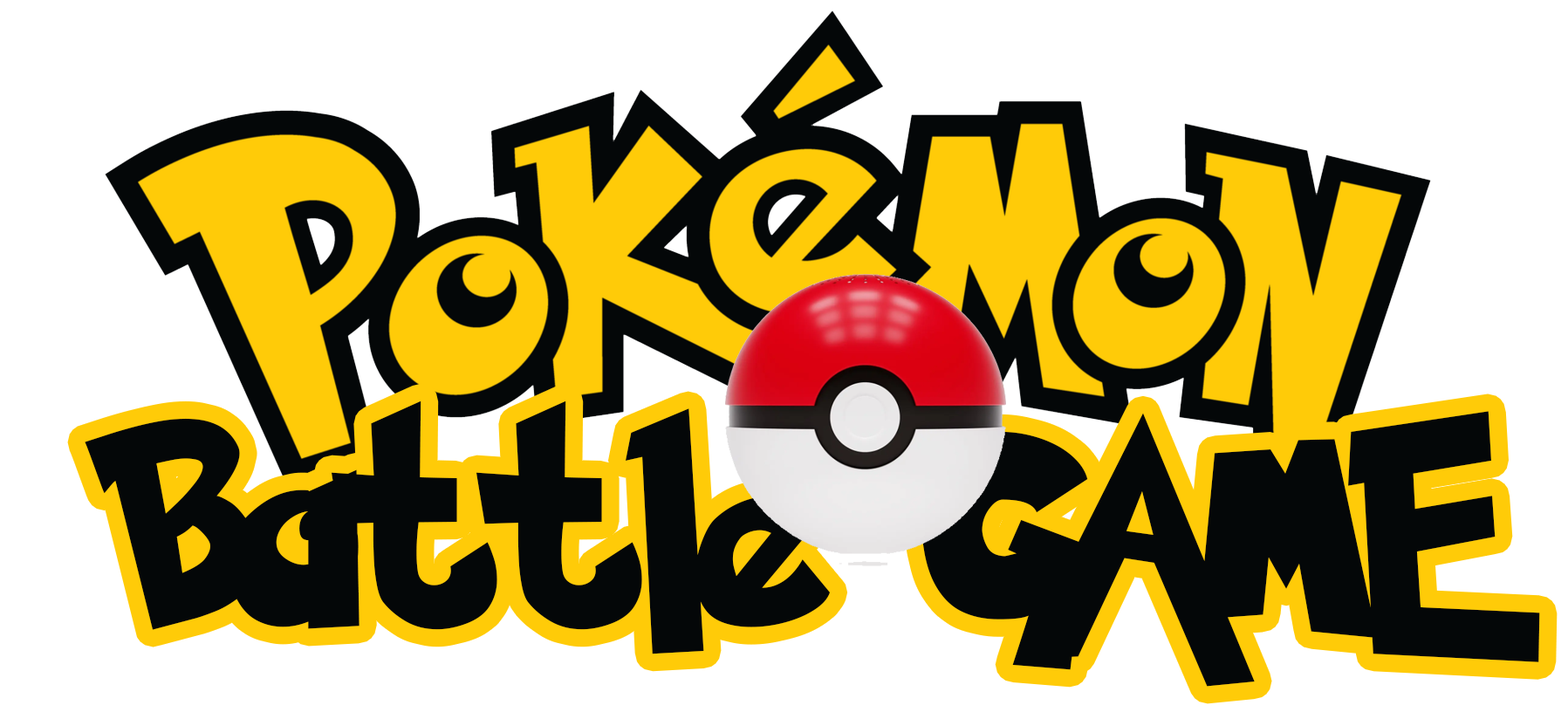
<style>
.page{position:relative;width:1568px;height:712px;background:#ffffff}
.page>*{position:absolute;margin:0}
.t1{font:232.5px "PokemonSolidNormal";color:#040708}
</style>
<div class="page">
<p class="t1" style="left:85px;top:401px;width:1455px;height:286px">Battle GAME</p>
</div>
